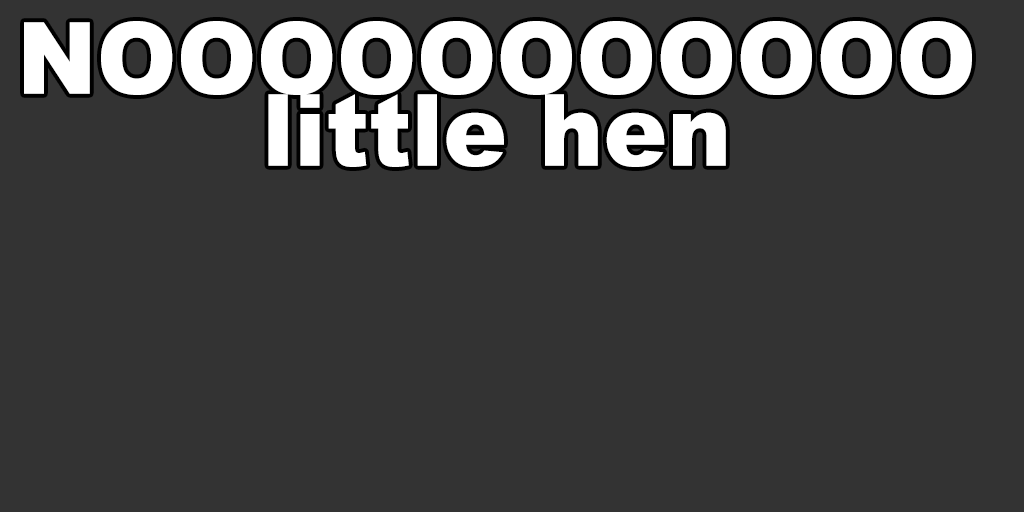
<style>
.page{position:relative;width:1024px;height:512px;background:#333333}
.page>*{position:absolute;margin:0}
.t1{font:99.8px/72px "Arial-Black";color:#ffffff;scale:0.96 1}
</style>
<div class="page">
<p class="t1" style="left:24px;top:21px;width:948px;height:146px;text-align:center">NOOOOOOOOOOO<br>little hen</p>
</div>
